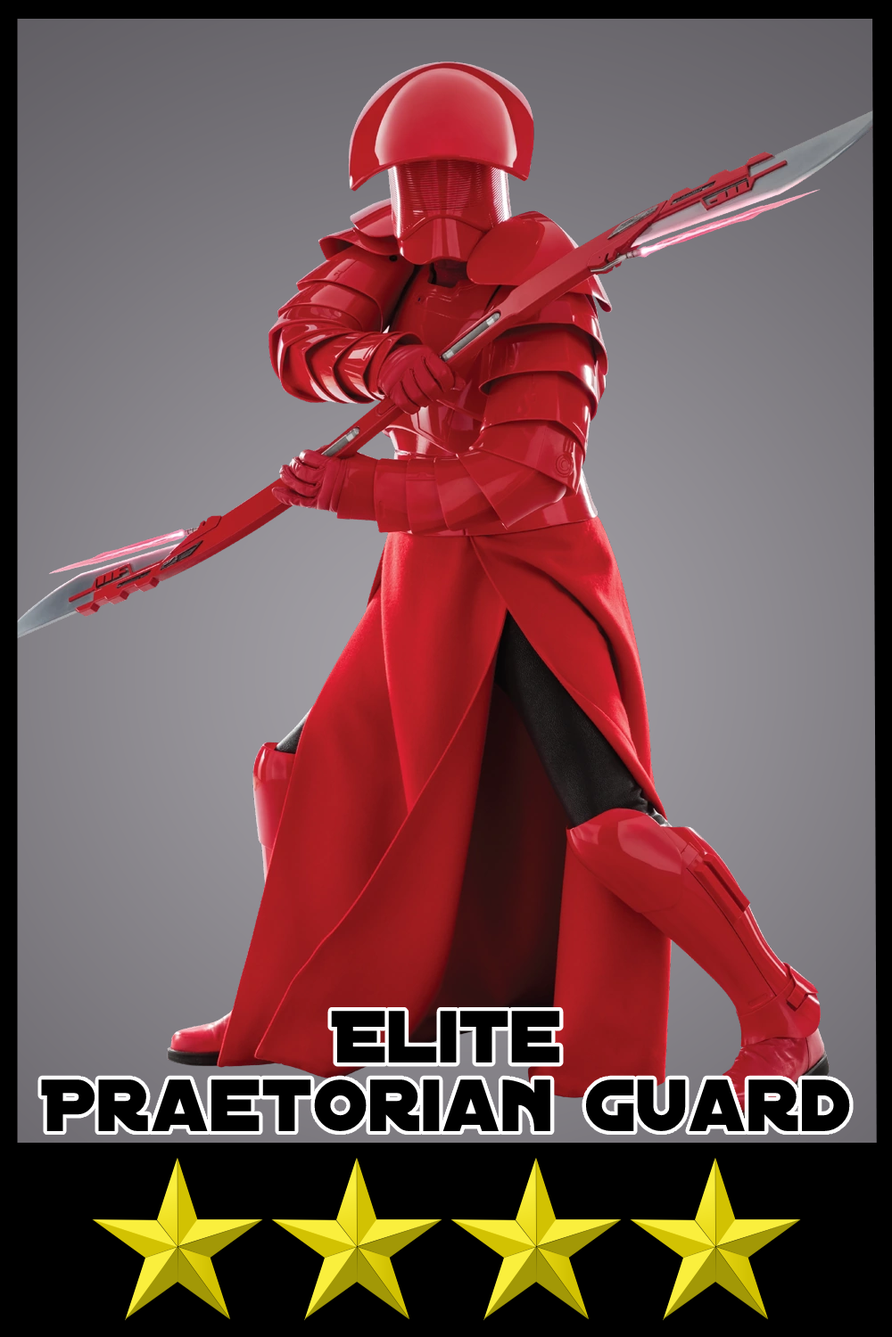
<style>
.page{position:relative;width:892px;height:1337px}
.page>*{position:absolute;margin:0}
.t1{font:79.3px/68.6px "DistantGalaxy";color:#000000}
</style>
<div class="page">
<p class="t1" style="left:41px;top:1011px;width:809px;height:120px;text-align:center">Elite <br>Praetorian Guard</p>
</div>
